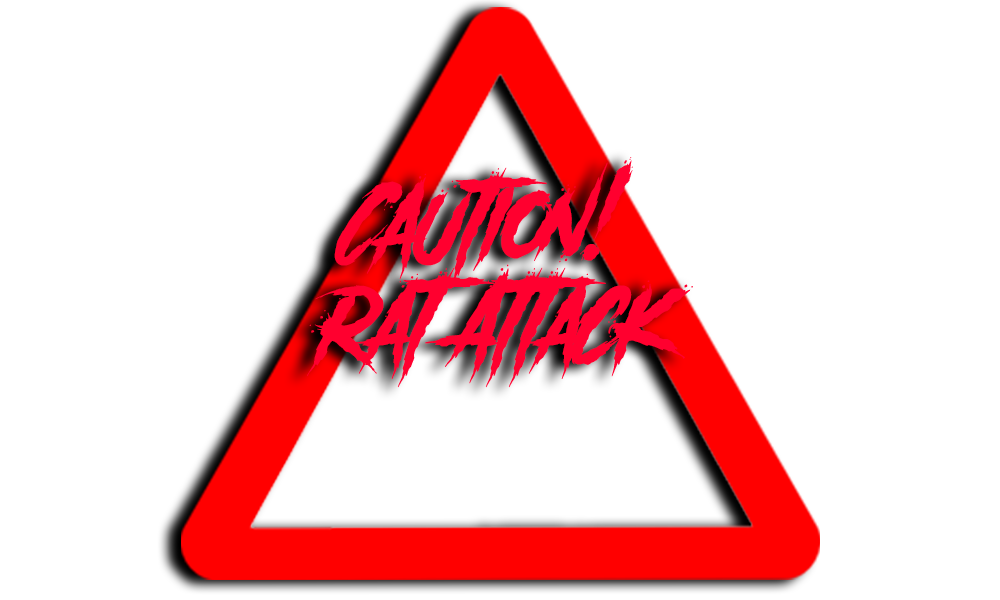
<style>
.page{position:relative;width:1000px;height:600px;background:#ffffff}
.page>*{position:absolute;margin:0}
.t1{font:87.7px/100px "AnotherDangerSlantedDemo";color:#ff002f}
</style>
<div class="page">
<p class="t1" style="left:307px;top:157px;width:386px;height:231px;text-align:center">Caution! <br>Rat Attack</p>
</div>
